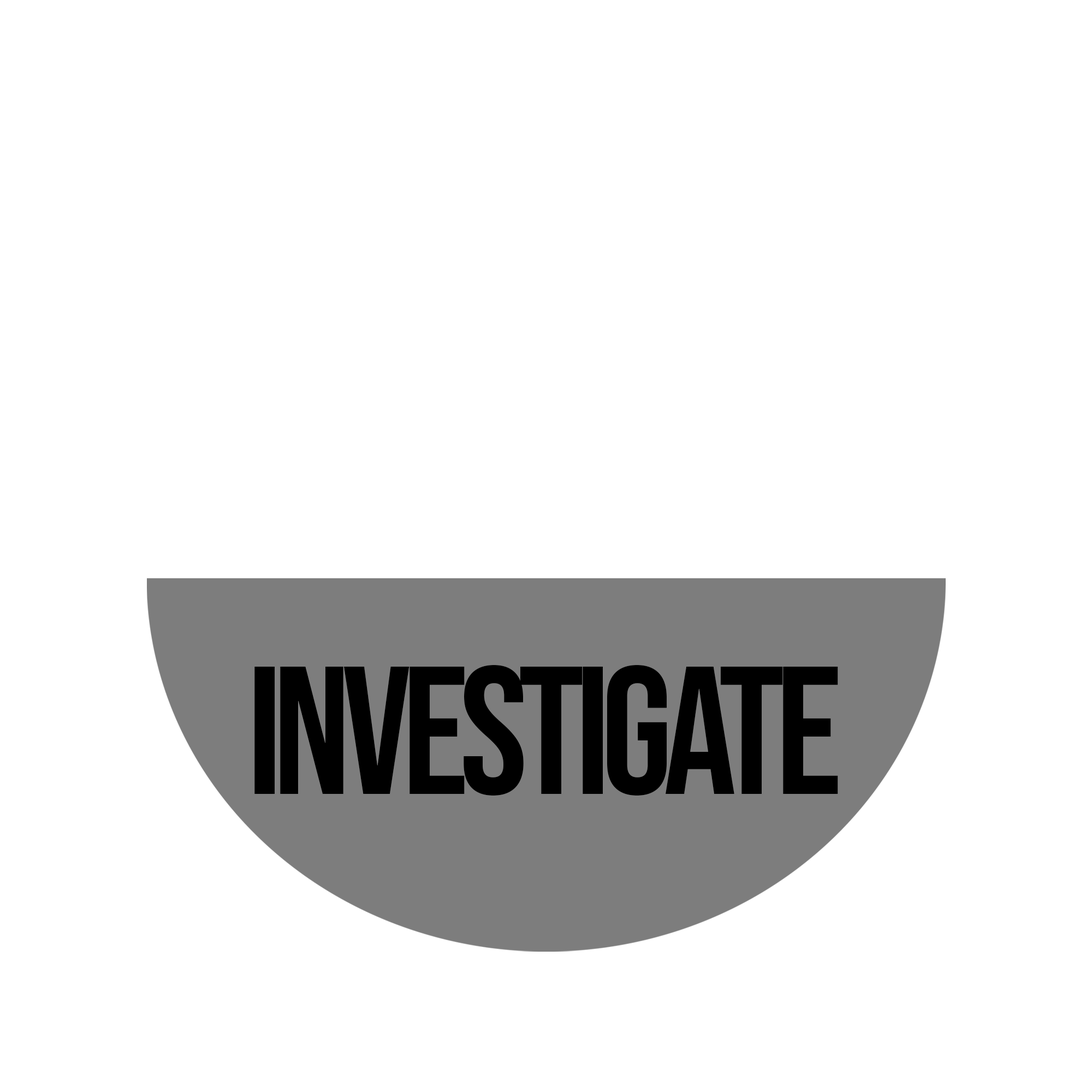
<style>
.page{position:relative;width:1092px;height:1092px;background:#ffffff}
.page>*{position:absolute;margin:0}
.t1{font:182px "BebasNeue-Regular";letter-spacing:-0.05em;color:#000000}
</style>
<div class="page">
<p class="t1" style="left:254px;top:665px;width:584px;height:131px">Investigate</p>
</div>
